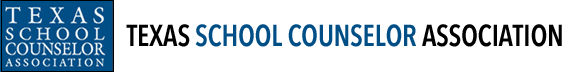
<style>
.page{position:relative;width:571px;height:72px;background:#ffffff}
.page>*{position:absolute;margin:0}
.t1{font:30px "AvenirNextCondensed-DemiBold";letter-spacing:-0.01em;color:#004e86;scale:0.95 1}
.t2{font:30px "AvenirNextCondensed-DemiBold";letter-spacing:-0.01em;color:#000000;scale:0.95 1}
</style>
<div class="page">
<p class="t1" style="left:126px;top:24px;width:436px;height:23px"><span class="t2">TEXAS </span>SCHOOL COUNSELOR <span class="t2">ASSOCIATION</span></p>
</div>
